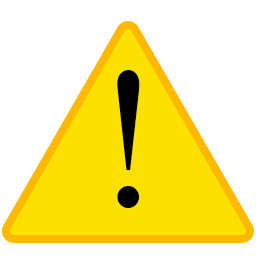
<style>
.page{position:relative;width:256px;height:256px;background:#ffffff}
.page>*{position:absolute;margin:0}
.t1{font:12px "TimesNewRomanPSMT";color:#000000}
</style>
<div class="page">
<p class="t1" style="left:117px;top:70px;width:23px;height:138px">!</p>
</div>
